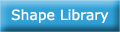
<style>
.page{position:relative;width:120px;height:32px}
.page>*{position:absolute;margin:0}
.t1{font:14px "Verdana";color:#ffffff}
</style>
<div class="page">
<p class="t1" style="left:11px;top:9px;width:98px;height:14px">Shape Library</p>
</div>
